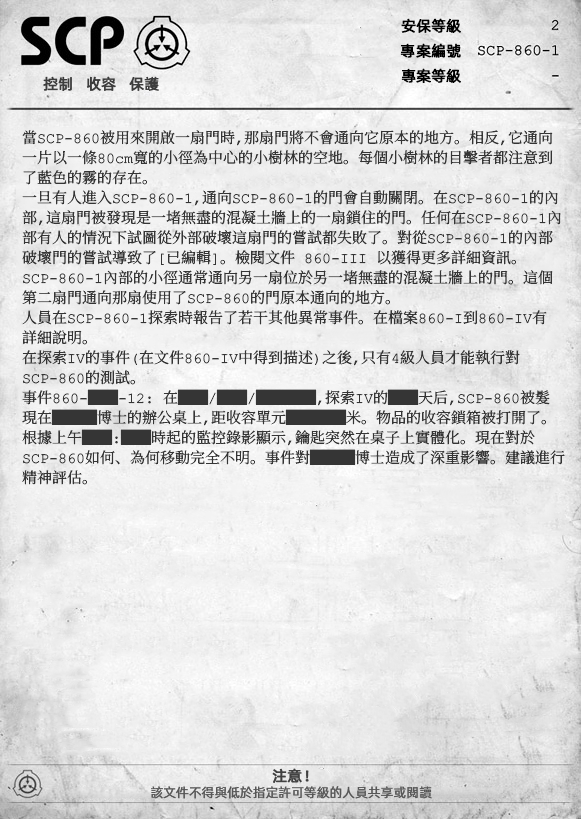
<style>
.page{position:relative;width:581px;height:819px}
.page>*{position:absolute;margin:0}
.t1{font:15px "AlibabaPuHuiTiR";color:#000000;font-weight:bold}
.t2{font:15px "AlibabaPuHuiTiR";color:#3d3d3d;font-weight:bold}
.t3{font:15px/20px "ContainmentBreach-Regular";color:#353535}
.t4{font:15px "AlibabaPuHuiTiR";color:#414141;font-weight:bold}
.t5{font:13px "AlibabaPuHuiTiR";color:#575757}
</style>
<div class="page">
<p class="t1" style="left:401px;top:18px;width:60px;height:15px">安保等級</p>
<p class="t1" style="left:400px;top:43px;width:61px;height:15px">專案編號</p>
<p class="t2" style="left:43px;top:76px;width:116px;height:15px">控制   收容   保護</p>
<p class="t1" style="left:401px;top:68px;width:60px;height:15px">專案等級</p>
<p class="t3" style="left:22px;top:130px;width:543px;height:355px">當SCP-860被用來開啟一扇門時，那扇門將不會通向它原本的地方。相反，它通向<br>一片以一條80cm寬的小徑為中心的小樹林的空地。每個小樹林的目擊者都注意到<br>了藍色的霧的存在。<br>一旦有人進入SCP-860-1，通向SCP-860-1的門會自動關閉。在SCP-860-1的內<br>部，這扇門被發現是一堵無盡的混凝土牆上的一扇鎖住的門。任何在SCP-860-1內<br>部有人的情況下試圖從外部破壞這扇門的嘗試都失敗了。對從SCP-860-1的內部<br>破壞門的嘗試導致了[已編輯]。檢閱文件 860-III 以獲得更多詳細資訊。<br>SCP-860-1內部的小徑通常通向另一扇位於另一堵無盡的混凝土牆上的門。這個<br>第二扇門通向那扇使用了SCP-860的門原本通向的地方。<br>人員在SCP-860-1探索時報告了若干其他異常事件。在檔案860-I到860-IV有<br>詳細說明。<br>在探索IV的事件（在文件860-IV中得到描述）之後，只有4級人員才能執行對<br>SCP-860的測試。<br>事件860-██-12： 在██/██/████，探索IV的██天后，SCP-860被髮<br>現在███博士的辦公桌上，距收容單元████米。物品的收容鎖箱被打開了。<br>根據上午██:██時起的監控錄影顯示，鑰匙突然在桌子上實體化。現在對於<br>SCP-860如何、為何移動完全不明。事件對███博士造成了深重影響。建議進行<br>精神評估。</p>
<p class="t4" style="left:272px;top:768px;width:37px;height:15px">注意！</p>
<p class="t5" style="left:151px;top:786px;width:281px;height:13px">該文件不得與低於指定許可等級的人員共享或閱讀</p>
</div>
